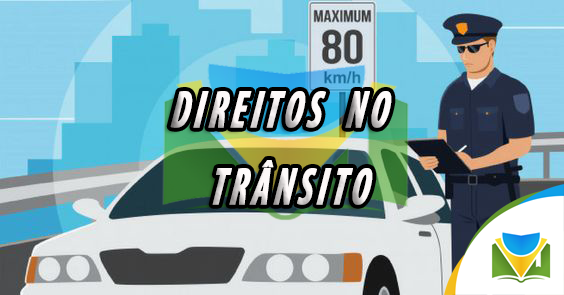
<style>
.page{position:relative;width:564px;height:295px}
.page>*{position:absolute;margin:0}
.t1{font:52.8px/38.9px "MyriadPro-BoldCondIt";letter-spacing:0.1em;color:#fdf8f8;text-transform:uppercase;font-weight:bold;font-style:italic;scale:0.7 1}
.t2{font:37.9px/38.9px "MyriadPro-BoldCondIt";letter-spacing:0.1em;color:#fdf8f8;text-transform:uppercase;font-weight:bold;font-style:italic;scale:0.7 1}
</style>
<div class="page">
<p class="t1" style="left:170px;top:91px;width:222px;height:114px;text-align:center"><span class="t2"> </span><br>direitos  no<br><br>  trânsito</p>
</div>
